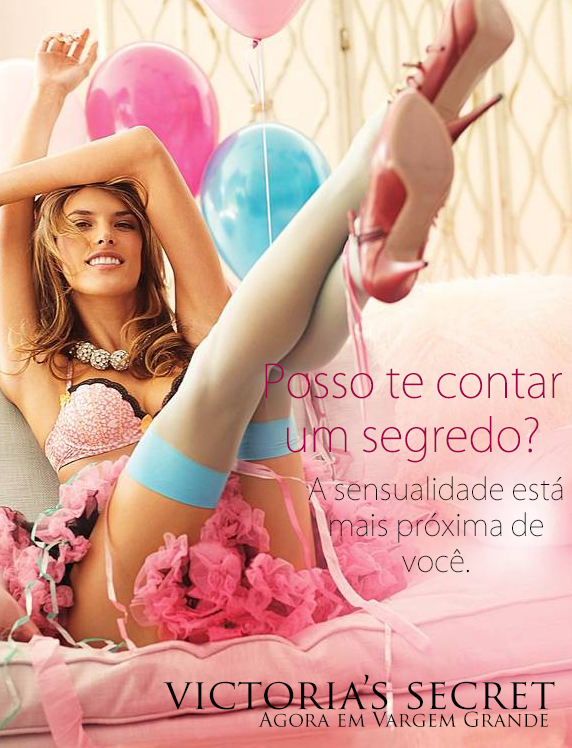
<style>
.page{position:relative;width:572px;height:748px}
.page>*{position:absolute;margin:0}
.t1{font:45px "KozGoPr6N-ExtraLight";color:#a10447}
.t2{font:30px "KozGoPr6N-ExtraLight";color:#000000}
.t3{font:42px "TrajanPro-Regular";color:#040404}
.t4{font:20px "TrajanPro-Regular";color:#040404}
</style>
<div class="page">
<p class="t1" style="left:265px;top:363px;width:297px;height:100px;text-align:center">Posso te contar um segredo?</p>
<p class="t2" style="left:308px;top:476px;width:255px;height:97px;text-align:center">A sensualidade está mais próxima de você.</p>
<p class="t3" style="left:163px;top:674px;width:392px;height:36px">victoria’s secret</p>
<p class="t4" style="left:258px;top:711px;width:290px;height:16px">Agora em Vargem Grande</p>
</div>
